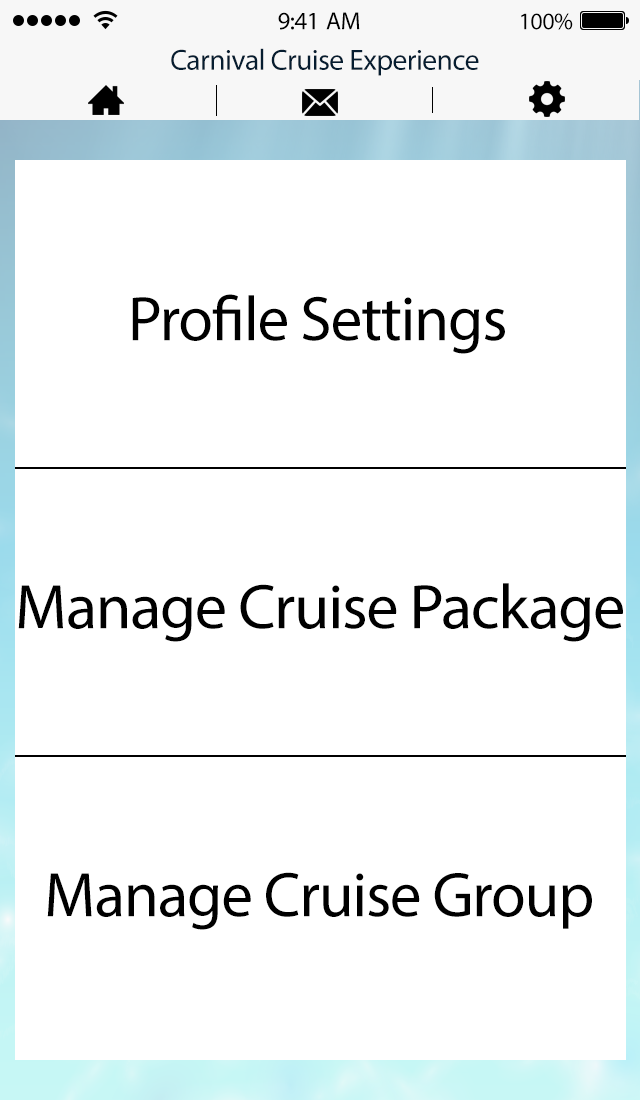
<style>
.page{position:relative;width:640px;height:1100px;background:#ffffff}
.page>*{position:absolute;margin:0}
.t1{font:25px "MyriadPro-Regular";letter-spacing:-0.02em;color:#000000}
.t2{font:24px "MyriadPro-Regular";letter-spacing:-0.02em;color:#000000}
.t3{font:29.4px "MyriadPro-Regular";letter-spacing:-0.02em;color:#061d30}
.t4{font:63.5px "MyriadPro-Regular";letter-spacing:-0.02em;color:#000000}
</style>
<div class="page">
<p class="t1" style="left:278px;top:12px;width:82px;height:18px">9:41 AM</p>
<p class="t2" style="left:521px;top:13px;width:52px;height:17px">100%</p>
<p class="t3" style="left:171px;top:48px;width:308px;height:28px">Carnival Cruise Experience</p>
<p class="t4" style="left:132px;top:294px;width:373px;height:60px">Profile Settings</p>
<p class="t4" style="left:18px;top:583px;width:605px;height:59px">Manage Cruise Package</p>
<p class="t4" style="left:47px;top:872px;width:545px;height:58px">Manage Cruise Group</p>
</div>
